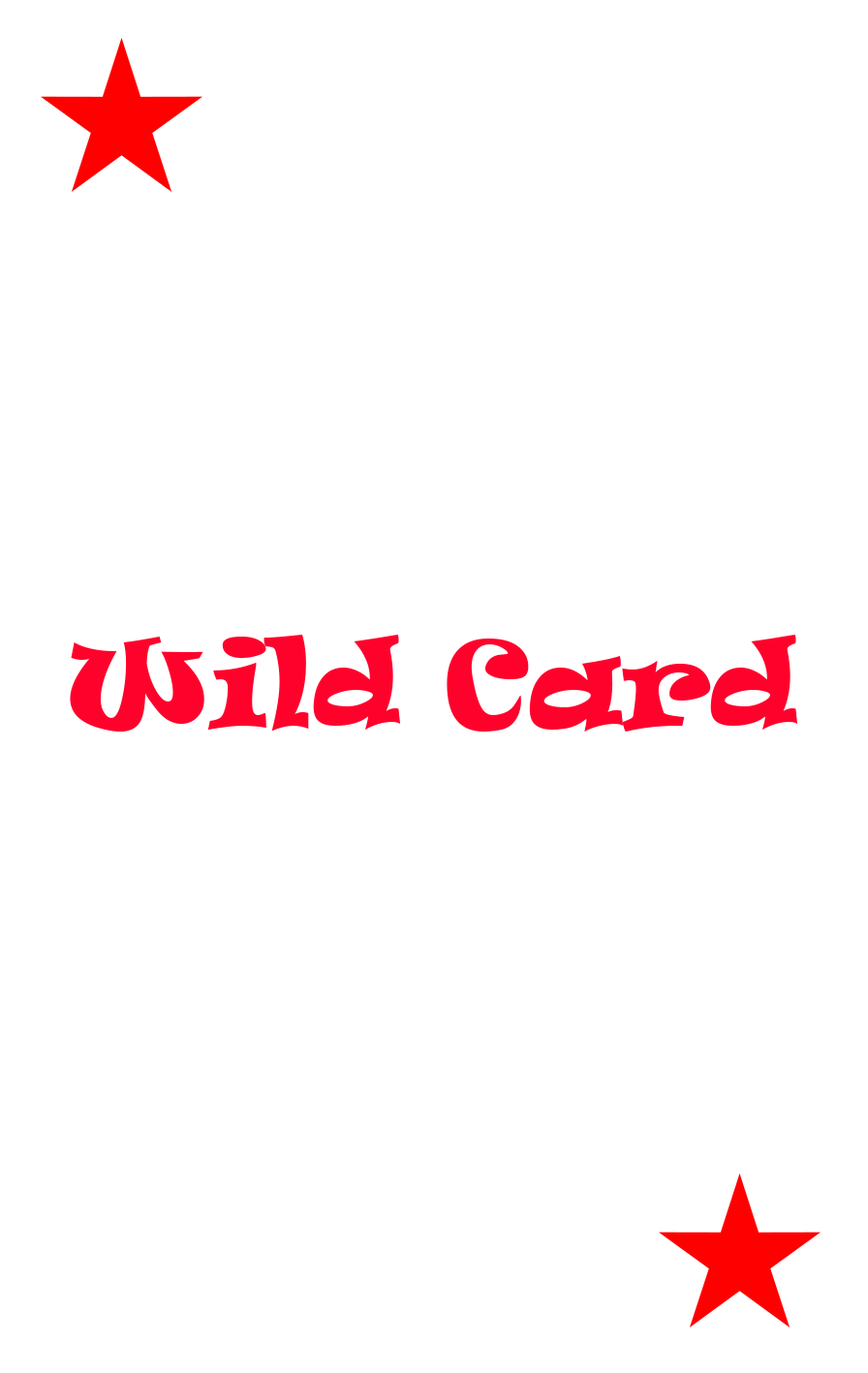
<style>
.page{position:relative;width:868px;height:1373px;background:#ffffff}
.page>*{position:absolute;margin:0}
.t1{font:113.1px "Ravie";color:#fe022c}
</style>
<div class="page">
<p class="t1" style="left:70px;top:635px;width:728px;height:97px">Wild Card</p>
</div>
